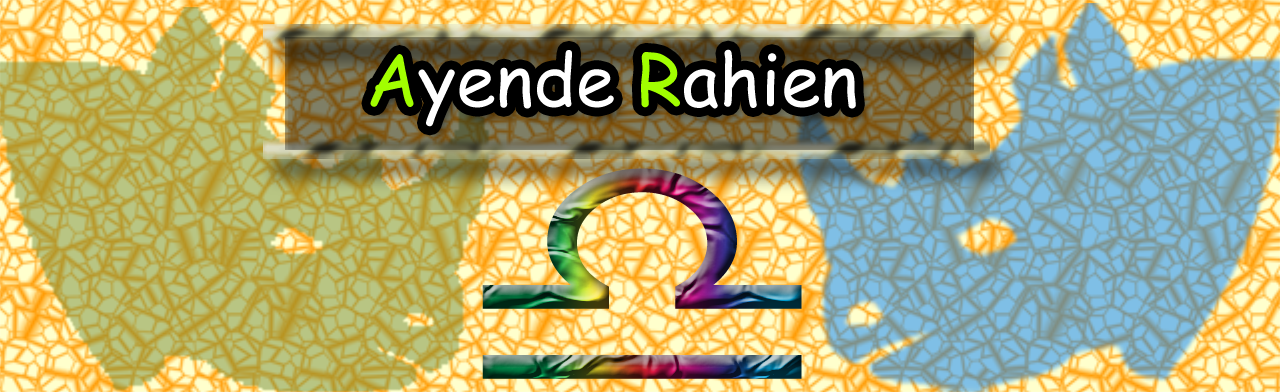
<style>
.page{position:relative;width:1280px;height:392px}
.page>*{position:absolute;margin:0}
.t1{font:72px "ComicSansMS";color:#ffffff}
.t2{font:72px "Vivaldii";color:#ffffff}
.t3{font:72px "ComicSansMS";color:#a2ff00}
</style>
<div class="page">
<p class="t1" style="left:370px;top:49px;width:486px;height:78px"><span class="t2"><br></span><span class="t3">A</span>yende <span class="t3">R</span>ahien</p>
</div>
